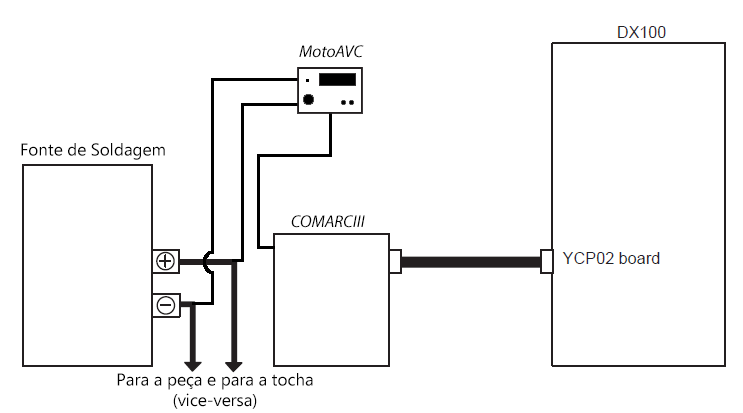
<style>
.page{position:relative;width:743px;height:413px;background:#ffffff}
.page>*{position:absolute;margin:0}
.t1{font:17px "MyriadPro-It";color:#000000}
.t2{font:17px "MicrosoftNewTaiLue";color:#000000}
</style>
<div class="page">
<p class="t1" style="left:299px;top:45px;width:65px;height:13px">MotoAVC</p>
<p class="t2" style="left:21px;top:143px;width:144px;height:17px">Fonte de Soldagem</p>
<p class="t1" style="left:291px;top:215px;width:74px;height:13px">COMARCIII</p>
<p class="t2" style="left:117px;top:373px;width:196px;height:36px;text-align:center">Para a peça e para a tocha (vice-versa)</p>
</div>
